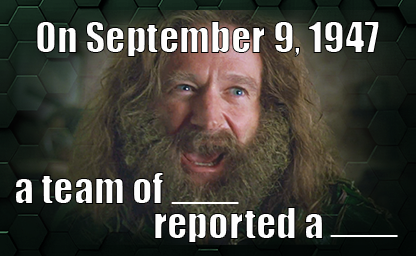
<style>
.page{position:relative;width:416px;height:256px}
.page>*{position:absolute;margin:0}
.t1{font:40px "Impact";color:#ffffff}
</style>
<div class="page">
<p class="t1" style="left:36px;top:21px;width:344px;height:36px">On September 9, 1947</p>
<p class="t1" style="left:15px;top:172px;width:149px;height:32px">a team of</p>
<p class="t1" style="left:154px;top:207px;width:169px;height:36px">reported a</p>
<p class="t1" style="left:171px;top:202px;width:68px;height:2px">___</p>
<p class="t1" style="left:330px;top:235px;width:68px;height:2px">___</p>
</div>
